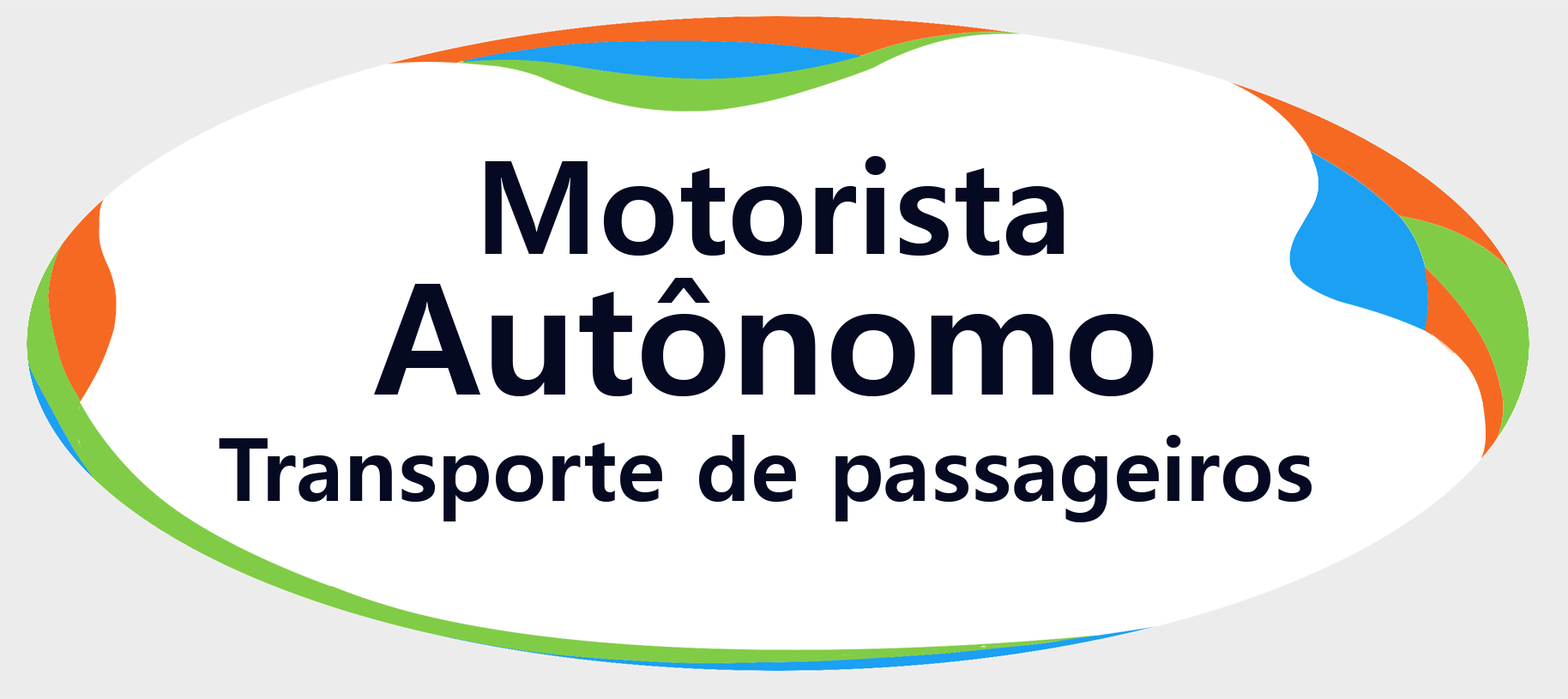
<style>
.page{position:relative;width:1568px;height:699px;background:#ffffff}
.page>*{position:absolute;margin:0}
.t1{font:128.7px "MalgunGothicBold";color:#050922}
.t2{font:154.4px "MalgunGothicBold";color:#050922}
.t3{font:87.5px "MalgunGothicBold";color:#050922}
</style>
<div class="page">
<p class="t1" style="left:485px;top:156px;width:579px;height:100px">Motorista</p>
<p class="t2" style="left:374px;top:277px;width:780px;height:119px">Autônomo</p>
<p class="t3" style="left:219px;top:435px;width:1093px;height:87px">Transporte de passageiros</p>
</div>
